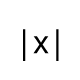
<style>
.page{position:relative;width:80px;height:80px;background:#ffffff}
.page>*{position:absolute;margin:0}
.t1{font:31.8px "DroidSans";color:#000000}
</style>
<div class="page">
<p class="t1" style="left:23px;top:29px;width:36px;height:32px">|x|</p>
</div>
